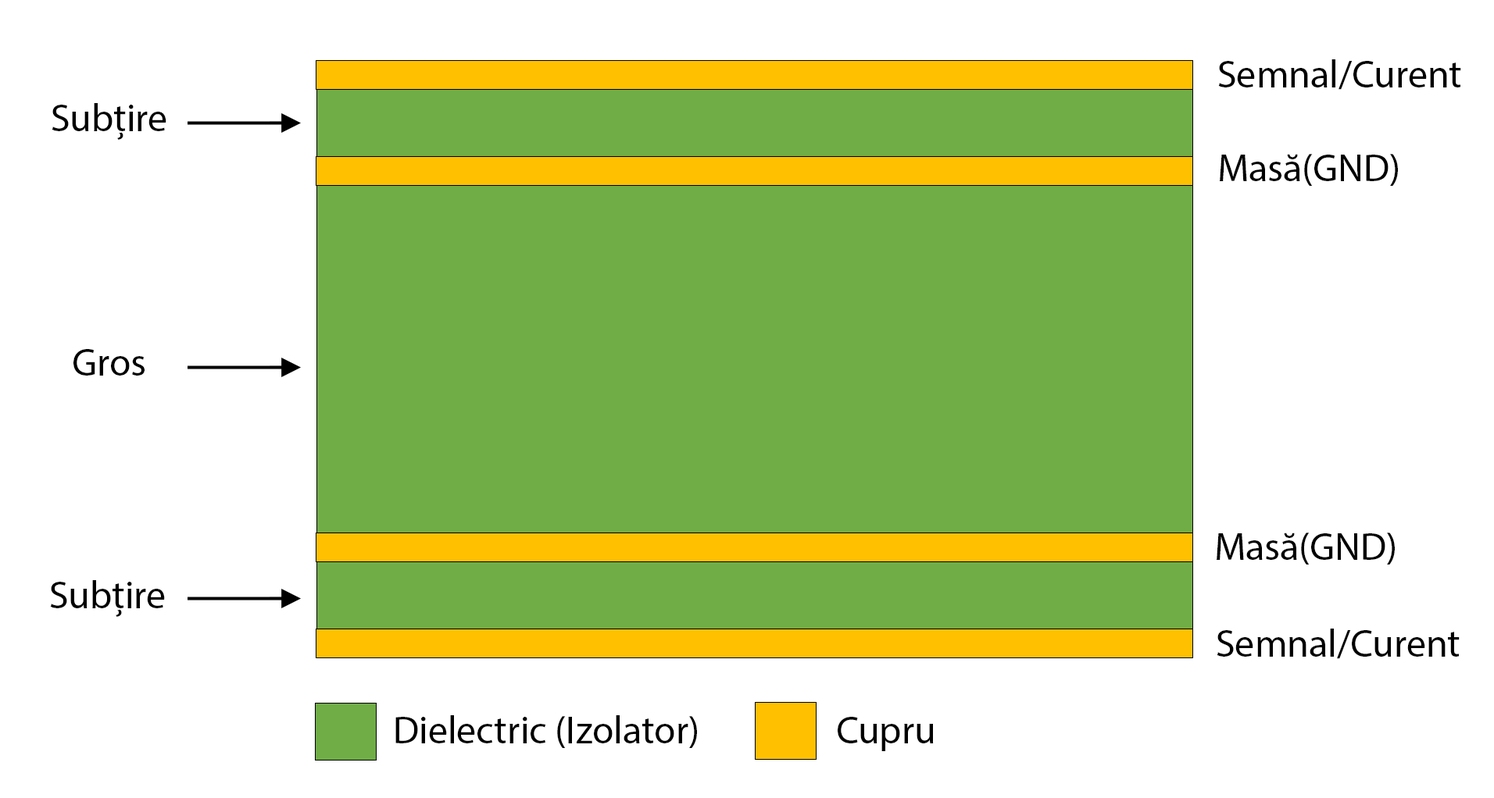
<style>
.page{position:relative;width:1494px;height:798px;background:#ffffff}
.page>*{position:absolute;margin:0}
.t1{font:39.1px "MyriadPro-Regular";color:#000000}
</style>
<div class="page">
<p class="t1" style="left:1218px;top:59px;width:243px;height:31px">Semnal/Curent</p>
<p class="t1" style="left:52px;top:103px;width:114px;height:37px">Subțire</p>
<p class="t1" style="left:1219px;top:154px;width:179px;height:32px">Masă(GND)</p>
<p class="t1" style="left:73px;top:349px;width:72px;height:27px">Gros</p>
<p class="t1" style="left:1216px;top:533px;width:178px;height:32px">Masă(GND)</p>
<p class="t1" style="left:50px;top:580px;width:115px;height:37px">Subțire</p>
<p class="t1" style="left:1216px;top:629px;width:243px;height:30px">Semnal/Curent</p>
<p class="t1" style="left:395px;top:716px;width:302px;height:32px">Dielectric (Izolator)</p>
<p class="t1" style="left:837px;top:717px;width:97px;height:34px">Cupru</p>
</div>
